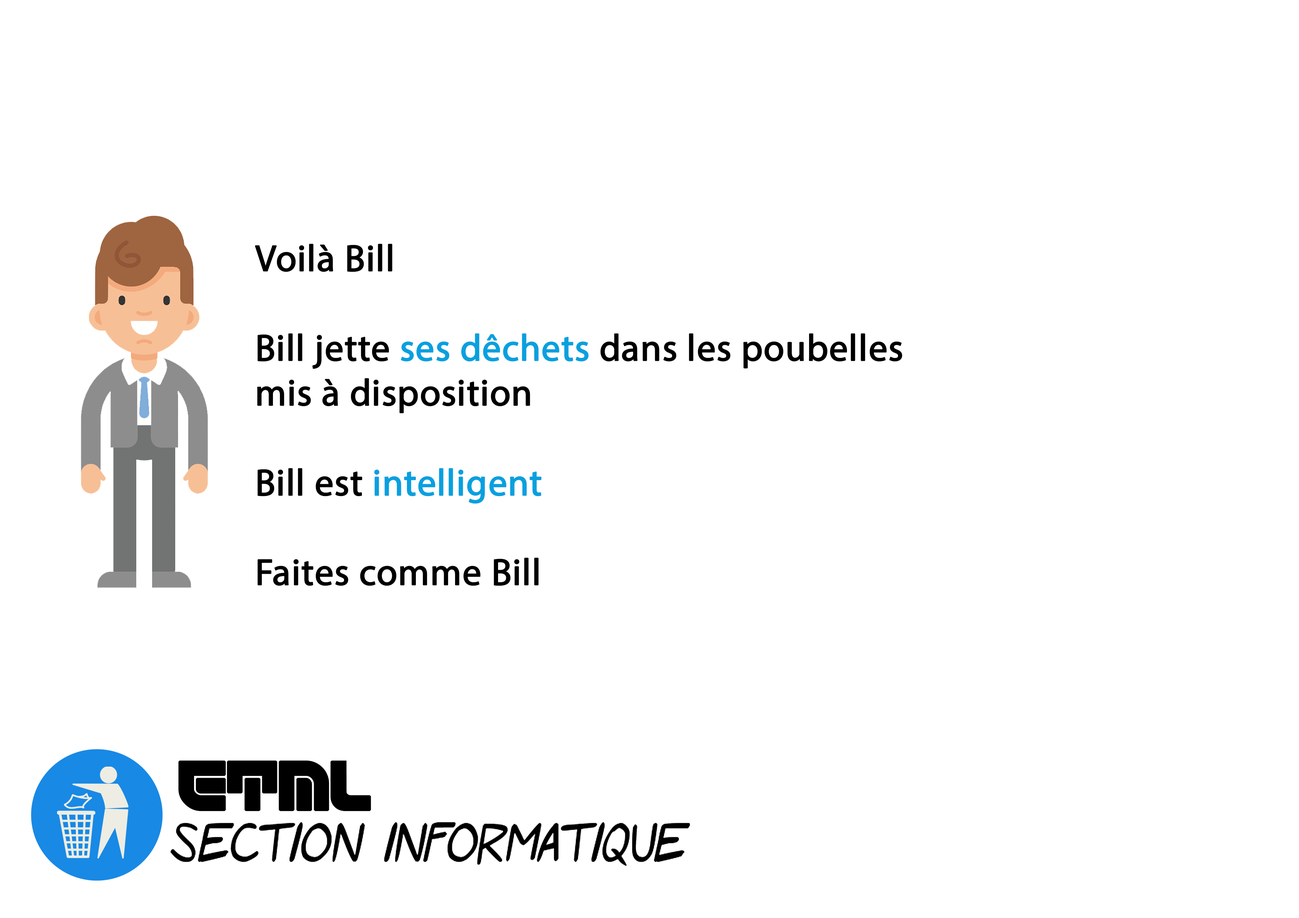
<style>
.page{position:relative;width:1299px;height:918px;background:#ffffff}
.page>*{position:absolute;margin:0}
.t1{font:37.4px "MyriadPro-Regular";color:#000000;font-weight:bold}
.t2{font:37.4px "MyriadPro-Regular";color:#08a0df;font-weight:bold}
.t3{font:49.6px "ETML-Regular";color:#000000;font-weight:bold}
</style>
<div class="page">
<p class="t1" style="left:255px;top:244px;width:647px;height:342px">Voilà Bill<br><br>Bill jette <span class="t2">ses dêchets</span> dans les poubelles <br>mis à disposition<br><br>Bill est <span class="t2">intelligent<br></span><br>Faites comme Bill</p>
<p class="t3" style="left:178px;top:760px;width:193px;height:52px">ETML</p>
</div>
